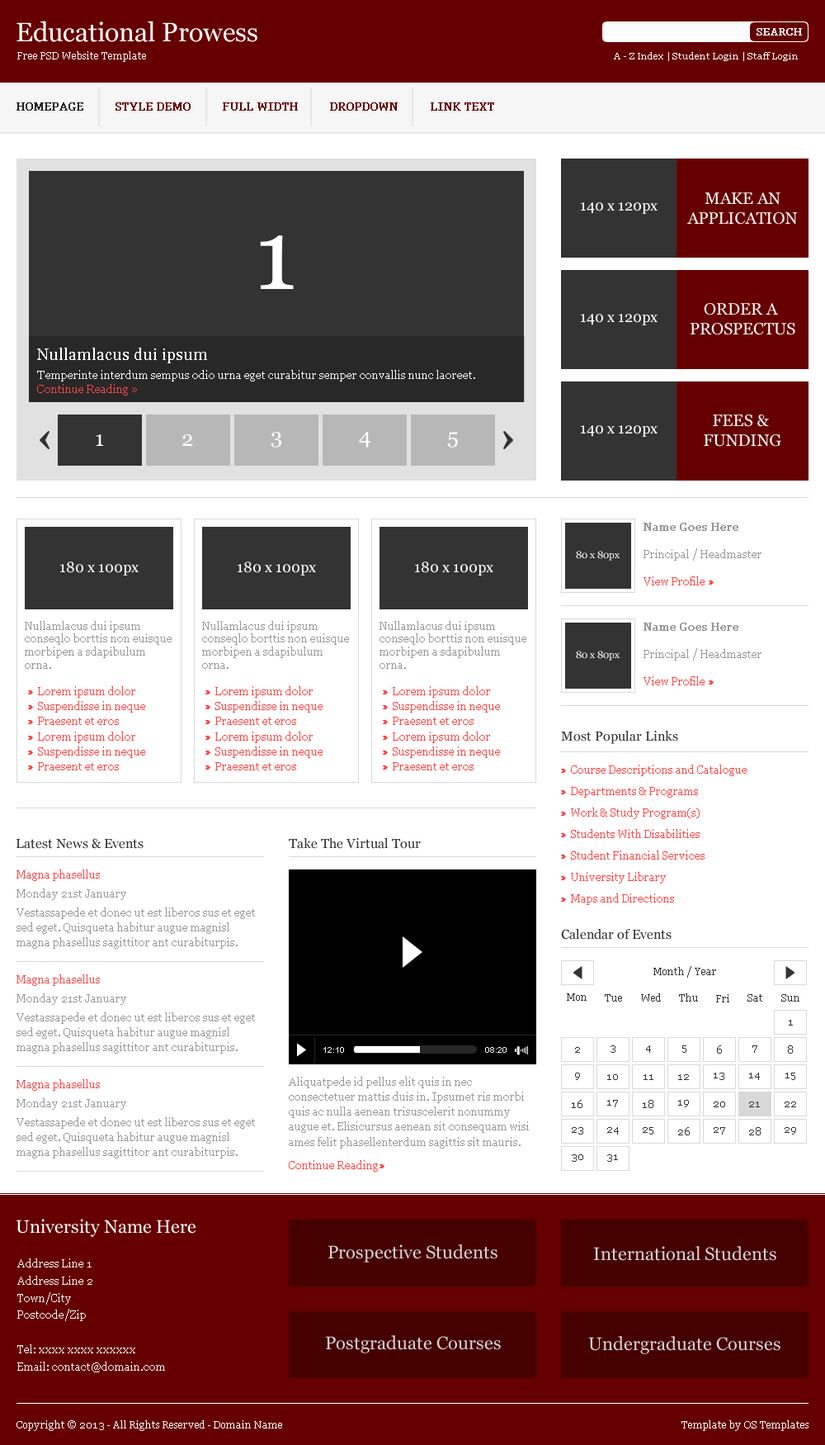
<style>
.page{position:relative;width:825px;height:1445px;background:#ffffff}
.page>*{position:absolute;margin:0}
.t1{font:26.4px "Georgia";color:#fcfcfc}
.t2{font:9.9px "Georgia";color:#fcfcfc;font-weight:bold}
.t3{font:9.9px "Georgia";color:#fcfcfc}
.t4{font:9.1px "Georgia";color:#fcfcfc}
.t5{font:10.7px "Georgia";color:#242424;font-weight:bold}
.t6{font:10.7px "Georgia";color:#660000;font-weight:bold}
.t7{font:16.5px/19.8px "Georgia";color:#ffffff}
.t8{font:14.9px "Georgia";color:#ffffff}
.t9{font:99.1px "Georgia";color:#ffffff}
.t10{font:16.5px "Georgia";color:#ffffff}
.t11{font:11.6px "Georgia";color:#ffffff}
.t12{font:11.6px "Georgia";color:#ff4646}
.t13{font:21.5px "Georgia";color:#ffffff}
.t14{font:10.7px "Georgia";color:#979797;font-weight:bold}
.t15{font:9.9px "Georgia";color:#ffffff}
.t16{font:10.7px "Georgia";color:#979797}
.t17{font:10.7px "Georgia";color:#ff4646}
.t18{font:10.7px "Georgia";color:#ff4646;font-weight:bold}
.t19{font:10.7px/12.9px "Georgia";color:#979797}
.t20{font:10.7px/15px "Georgia";color:#ff4646}
.t21{font:10.7px/10.7px "Georgia";color:#ff4646;font-weight:bold}
.t22{font:13.2px "Georgia";color:#333333}
.t23{font:10.7px/21.5px "Georgia";color:#ff4646}
.t24{font:10.7px/21.5px "Georgia";color:#ff4646;font-weight:bold}
.t25{font:10.7px/15px "Georgia";color:#979797}
.t26{font:9.9px "Georgia";color:#333333}
.t27{font:8.3px "ArialMT";color:#ffffff}
.t28{font:18.2px "Georgia";color:#ffffff}
.t29{font:18.2px "Georgia";color:#d2d2d2}
.t30{font:10.7px/17.2px "Georgia";color:#f8f9f3}
</style>
<div class="page">
<p class="t1" style="left:17px;top:21px;width:241px;height:21px">Educational Prowess</p>
<p class="t2" style="left:757px;top:28px;width:45px;height:7px">SEARCH</p>
<p class="t3" style="left:17px;top:51px;width:129px;height:11px">Free PSD Website Template</p>
<p class="t4" style="left:614px;top:52px;width:184px;height:9px">A - Z Index | Student Login | Staff Login</p>
<p class="t5" style="left:17px;top:102px;width:66px;height:9px">HOMEPAGE</p>
<p class="t6" style="left:116px;top:102px;width:75px;height:9px">STYLE DEMO</p>
<p class="t6" style="left:223px;top:102px;width:75px;height:9px">FULL WIDTH</p>
<p class="t6" style="left:330px;top:102px;width:68px;height:9px">DROPDOWN</p>
<p class="t6" style="left:431px;top:102px;width:63px;height:9px">LINK TEXT</p>
<p class="t7" style="left:688px;top:192px;width:110px;height:33px;text-align:center">MAKE AN<br>APPLICATION</p>
<p class="t8" style="left:581px;top:202px;width:77px;height:12px">140 x 120px</p>
<p class="t9" style="left:260px;top:235px;width:34px;height:54px">1</p>
<p class="t7" style="left:690px;top:303px;width:106px;height:32px;text-align:center">ORDER A <br>PROSPECTUS</p>
<p class="t8" style="left:581px;top:314px;width:77px;height:11px">140 x 120px</p>
<p class="t10" style="left:37px;top:348px;width:170px;height:15px">Nullamlacus dui ipsum</p>
<p class="t11" style="left:37px;top:370px;width:438px;height:11px">Temperinte interdum sempus odio urna eget curabitur semper convallis nunc laoreet.</p>
<p class="t12" style="left:37px;top:384px;width:100px;height:11px">Continue Reading »</p>
<p class="t8" style="left:581px;top:425px;width:77px;height:12px">140 x 120px</p>
<p class="t7" style="left:704px;top:414px;width:78px;height:33px;text-align:center">FEES &amp; <br>FUNDING</p>
<p class="t13" style="left:96px;top:434px;width:8px;height:12px">1</p>
<p class="t13" style="left:182px;top:434px;width:11px;height:12px">2</p>
<p class="t13" style="left:271px;top:432px;width:10px;height:15px">3</p>
<p class="t13" style="left:359px;top:432px;width:12px;height:15px">4</p>
<p class="t13" style="left:447px;top:432px;width:11px;height:15px">5</p>
<p class="t14" style="left:644px;top:523px;width:95px;height:8px">Name Goes Here</p>
<p class="t15" style="left:576px;top:551px;width:44px;height:9px">80 x 80px</p>
<p class="t16" style="left:644px;top:548px;width:118px;height:12px">Principal / Headmaster</p>
<p class="t8" style="left:60px;top:561px;width:79px;height:14px">180 x 100px</p>
<p class="t8" style="left:238px;top:561px;width:78px;height:14px">180 x 100px</p>
<p class="t8" style="left:415px;top:561px;width:79px;height:14px">180 x 100px</p>
<p class="t17" style="left:644px;top:576px;width:70px;height:9px">View Profile <span class="t18">»</span></p>
<p class="t19" style="left:25px;top:621px;width:147px;height:48px">Nullamlacus dui ipsum conseqlo borttis non euisque morbipen a sdapibulum orna.</p>
<p class="t19" style="left:202px;top:621px;width:147px;height:48px">Nullamlacus dui ipsum conseqlo borttis non euisque morbipen a sdapibulum orna.</p>
<p class="t19" style="left:380px;top:621px;width:147px;height:48px">Nullamlacus dui ipsum conseqlo borttis non euisque morbipen a sdapibulum orna.</p>
<p class="t14" style="left:644px;top:622px;width:95px;height:9px">Name Goes Here</p>
<p class="t15" style="left:576px;top:650px;width:44px;height:10px">80 x 80px</p>
<p class="t16" style="left:644px;top:648px;width:118px;height:12px">Principal / Headmaster</p>
<p class="t17" style="left:644px;top:676px;width:70px;height:9px">View Profile <span class="t18">»</span></p>
<p class="t20" style="left:28px;top:686px;width:117px;height:84px"><span class="t21">» </span>Lorem ipsum dolor<br><span class="t21">» </span>Suspendisse in neque<br><span class="t21">» </span>Praesent et eros<br><span class="t21">» </span>Lorem ipsum dolor<br><span class="t21">» </span>Suspendisse in neque<br><span class="t21">» </span>Praesent et eros</p>
<p class="t20" style="left:206px;top:686px;width:117px;height:84px"><span class="t21">» </span>Lorem ipsum dolor<br><span class="t21">» </span>Suspendisse in neque<br><span class="t21">» </span>Praesent et eros<br><span class="t21">» </span>Lorem ipsum dolor<br><span class="t21">» </span>Suspendisse in neque<br><span class="t21">» </span>Praesent et eros</p>
<p class="t20" style="left:383px;top:686px;width:117px;height:84px"><span class="t21">» </span>Lorem ipsum dolor<br><span class="t21">» </span>Suspendisse in neque<br><span class="t21">» </span>Praesent et eros<br><span class="t21">» </span>Lorem ipsum dolor<br><span class="t21">» </span>Suspendisse in neque<br><span class="t21">» </span>Praesent et eros</p>
<p class="t22" style="left:561px;top:731px;width:118px;height:13px">Most Popular Links</p>
<p class="t23" style="left:561px;top:764px;width:186px;height:141px"><span class="t24">» </span>Course Descriptions and Catalogue<br><span class="t24">» </span>Departments &amp; Programs<br><span class="t24">» </span>Work &amp; Study Program(s)<br><span class="t24">» </span>Students With Disabilities<br><span class="t24">» </span>Student Financial Services<br><span class="t24">» </span>University Library<br><span class="t24">» </span>Maps and Directions</p>
<p class="t22" style="left:16px;top:838px;width:128px;height:11px">Latest News &amp; Events</p>
<p class="t22" style="left:289px;top:838px;width:132px;height:11px">Take The Virtual Tour</p>
<p class="t17" style="left:17px;top:869px;width:83px;height:12px">Magna phasellus</p>
<p class="t16" style="left:17px;top:888px;width:109px;height:12px">Monday 21st January</p>
<p class="t25" style="left:17px;top:907px;width:238px;height:41px">Vestassapede et donec ut est liberos sus et eget sed eget. Quisqueta habitur augue magnisl magna phasellus sagittitor ant curabiturpis.</p>
<p class="t22" style="left:561px;top:929px;width:111px;height:10px">Calendar of Events</p>
<p class="t26" style="left:654px;top:966px;width:63px;height:11px">Month / Year</p>
<p class="t17" style="left:17px;top:974px;width:83px;height:12px">Magna phasellus</p>
<p class="t16" style="left:17px;top:993px;width:109px;height:12px">Monday 21st January</p>
<p class="t26" style="left:567px;top:993px;width:20px;height:7px">Mon</p>
<p class="t26" style="left:605px;top:994px;width:17px;height:7px">Tue</p>
<p class="t26" style="left:641px;top:993px;width:20px;height:8px">Wed</p>
<p class="t26" style="left:679px;top:993px;width:19px;height:8px">Thu</p>
<p class="t26" style="left:717px;top:994px;width:13px;height:8px">Fri</p>
<p class="t26" style="left:748px;top:994px;width:15px;height:7px">Sat</p>
<p class="t26" style="left:782px;top:994px;width:18px;height:7px">Sun</p>
<p class="t25" style="left:17px;top:1012px;width:238px;height:41px">Vestassapede et donec ut est liberos sus et eget sed eget. Quisqueta habitur augue magnisl magna phasellus sagittitor ant curabiturpis.</p>
<p class="t26" style="left:789px;top:1019px;width:4px;height:6px">1</p>
<p class="t27" style="left:324px;top:1047px;width:20px;height:5px">12:10</p>
<p class="t27" style="left:485px;top:1047px;width:22px;height:5px">08:20</p>
<p class="t26" style="left:575px;top:1047px;width:5px;height:5px">2</p>
<p class="t26" style="left:611px;top:1045px;width:5px;height:7px">3</p>
<p class="t26" style="left:646px;top:1045px;width:5px;height:7px">4</p>
<p class="t26" style="left:683px;top:1045px;width:4px;height:7px">5</p>
<p class="t26" style="left:717px;top:1045px;width:5px;height:8px">6</p>
<p class="t26" style="left:753px;top:1045px;width:5px;height:7px">7</p>
<p class="t26" style="left:788px;top:1045px;width:5px;height:8px">8</p>
<p class="t26" style="left:575px;top:1072px;width:5px;height:8px">9</p>
<p class="t26" style="left:608px;top:1074px;width:10px;height:6px">10</p>
<p class="t26" style="left:644px;top:1074px;width:10px;height:6px">11</p>
<p class="t26" style="left:679px;top:1074px;width:10px;height:6px">12</p>
<p class="t26" style="left:714px;top:1072px;width:11px;height:8px">13</p>
<p class="t26" style="left:750px;top:1072px;width:10px;height:8px">14</p>
<p class="t26" style="left:786px;top:1072px;width:10px;height:8px">15</p>
<p class="t17" style="left:17px;top:1079px;width:83px;height:11px">Magna phasellus</p>
<p class="t25" style="left:289px;top:1076px;width:240px;height:72px">Aliquatpede id pellus elit quis in nec consectetuer mattis duis in. Ipsumet ris morbi quis ac nulla aenean trisuscelerit nonummy augue et. Elisicursus aenean sit consequam wisi ames felit phasellenterdum sagittis sit mauris.</p>
<p class="t16" style="left:17px;top:1098px;width:109px;height:11px">Monday 21st January</p>
<p class="t26" style="left:572px;top:1100px;width:11px;height:8px">16</p>
<p class="t26" style="left:608px;top:1100px;width:10px;height:7px">17</p>
<p class="t26" style="left:643px;top:1100px;width:11px;height:8px">18</p>
<p class="t26" style="left:679px;top:1100px;width:10px;height:7px">19</p>
<p class="t26" style="left:714px;top:1101px;width:12px;height:6px">20</p>
<p class="t26" style="left:750px;top:1101px;width:10px;height:6px">21</p>
<p class="t26" style="left:785px;top:1101px;width:12px;height:6px">22</p>
<p class="t25" style="left:17px;top:1117px;width:238px;height:41px">Vestassapede et donec ut est liberos sus et eget sed eget. Quisqueta habitur augue magnisl magna phasellus sagittitor ant curabiturpis.</p>
<p class="t26" style="left:572px;top:1127px;width:12px;height:7px">23</p>
<p class="t26" style="left:608px;top:1127px;width:11px;height:7px">24</p>
<p class="t26" style="left:643px;top:1127px;width:11px;height:7px">25</p>
<p class="t26" style="left:679px;top:1127px;width:11px;height:8px">26</p>
<p class="t26" style="left:714px;top:1127px;width:12px;height:7px">27</p>
<p class="t26" style="left:750px;top:1127px;width:11px;height:8px">28</p>
<p class="t26" style="left:785px;top:1127px;width:12px;height:7px">29</p>
<p class="t26" style="left:572px;top:1154px;width:12px;height:7px">30</p>
<p class="t26" style="left:608px;top:1154px;width:10px;height:7px">31</p>
<p class="t17" style="left:289px;top:1160px;width:96px;height:11px">Continue Reading<span class="t18">»</span></p>
<p class="t28" style="left:16px;top:1218px;width:180px;height:19px">University Name Here</p>
<p class="t29" style="left:328px;top:1244px;width:170px;height:18px">Prospective Students</p>
<p class="t29" style="left:594px;top:1246px;width:183px;height:14px">International Students</p>
<p class="t30" style="left:17px;top:1258px;width:148px;height:114px">Address Line 1<br>Address Line 2<br>Town/City<br>Postcode/Zip<br><br>Tel: xxxx xxxx xxxxxx<br>Email: contact@domain.com</p>
<p class="t29" style="left:325px;top:1335px;width:176px;height:18px">Postgraduate Courses</p>
<p class="t29" style="left:589px;top:1336px;width:192px;height:18px">Undergraduate Courses</p>
<p class="t15" style="left:17px;top:1420px;width:265px;height:11px">Copyright © 2013 - All Rights Reserved - Domain Name</p>
<p class="t15" style="left:682px;top:1420px;width:127px;height:11px">Template by OS Templates</p>
</div>
